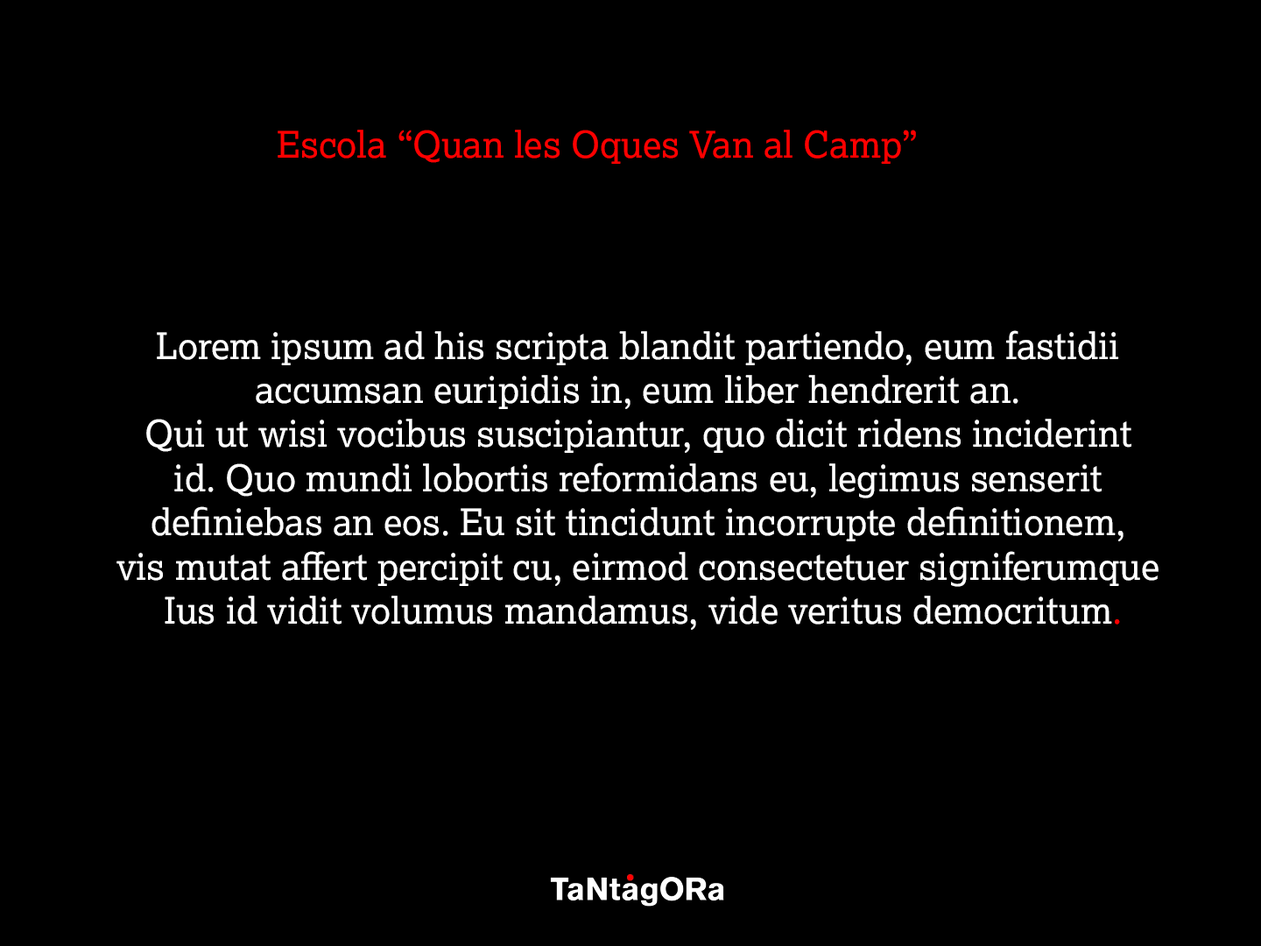
<style>
.page{position:relative;width:1261px;height:946px;background:#000000}
.page>*{position:absolute;margin:0}
.t1{font:36.8px "Lexia-Regular";color:#ff0000}
.t2{font:36.8px "Lexia-Regular";color:#ffffff}
</style>
<div class="page">
<p class="t1" style="left:278px;top:130px;width:638px;height:34px">Escola “Quan les Oques Van al Camp”</p>
<p class="t2" style="left:116px;top:330px;width:1042px;height:300px;text-align:center">Lorem ipsum ad his scripta blandit partiendo, eum fastidii <br>accumsan euripidis in, eum liber hendrerit an. <br>Qui ut wisi vocibus suscipiantur, quo dicit ridens inciderint <br>id. Quo mundi lobortis reformidans eu, legimus senserit <br>definiebas an eos. Eu sit tincidunt incorrupte definitionem, <br>vis mutat affert percipit cu, eirmod consectetuer signiferumque <br>Ius id vidit volumus mandamus, vide veritus democritum<span class="t1">.</span></p>
</div>
